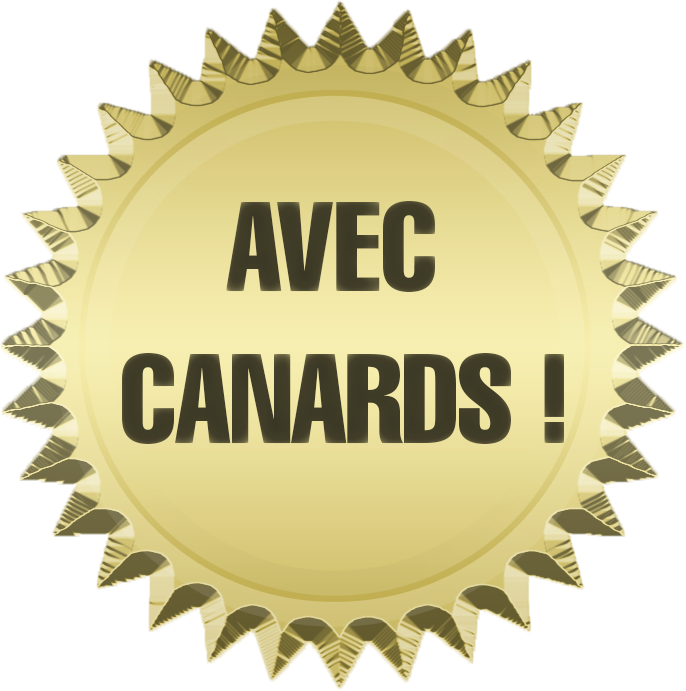
<style>
.page{position:relative;width:686px;height:691px;background:#ffffff}
.page>*{position:absolute;margin:0}
.t1{font:125px "Helvetica-Compressed";color:#3f3c27;text-transform:uppercase}
.t2{font:125px "Helvetica-Compressed";letter-spacing:-0.02em;color:#3f3c27;text-transform:uppercase}
</style>
<div class="page">
<p class="t1" style="left:226px;top:201px;width:209px;height:91px">avec</p>
<p class="t2" style="left:122px;top:353px;width:442px;height:91px">CANARDS !</p>
</div>
